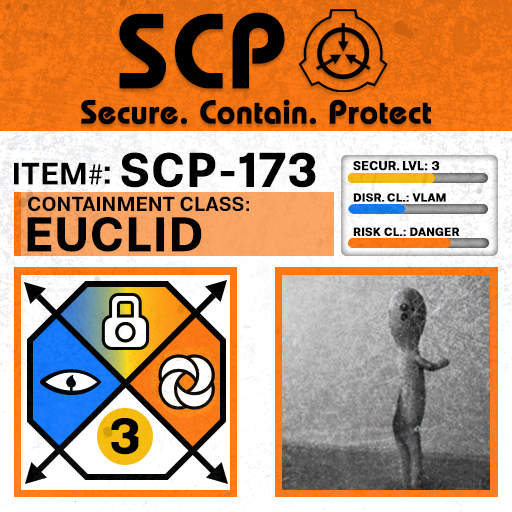
<style>
.page{position:relative;width:512px;height:512px}
.page>*{position:absolute;margin:0}
.t1{font:105.8px "BauhausLT-Demi";color:#000000;font-weight:bold}
.t2{font:33px "BauhausLT-Demi";color:#000000;font-weight:bold}
.t3{font:47.6px "Molde-Semibold";color:#000000;font-weight:bold}
.t4{font:12.5px "Molde-Semibold";color:#000000;font-weight:bold}
.t5{font:31.1px "Molde-Semibold";color:#000000}
.t6{font:31.1px "MyriadPro-Regular";color:#000000}
.t7{font:34.5px "Molde-Semibold";color:#000000}
.t8{font:20.3px "Molde-Semibold";color:#000000}
.t9{font:11.7px "Molde-Semibold";color:#000000;font-weight:bold}
.t10{font:47.8px "Molde-Semibold";color:#000000;font-weight:bold}
</style>
<div class="page">
<p class="t1" style="left:119px;top:12px;width:166px;height:77px">SCP</p>
<p class="t2" style="left:81px;top:99px;width:350px;height:26px">Secure. Contain. Protect</p>
<p class="t3" style="left:121px;top:152px;width:195px;height:36px">SCP-173</p>
<p class="t4" style="left:353px;top:161px;width:87px;height:10px">SECUR. LVL: 3</p>
<p class="t5" style="left:14px;top:162px;width:89px;height:23px">ITEM<span class="t6">#</span></p>
<p class="t7" style="left:104px;top:166px;width:6px;height:18px">:</p>
<p class="t8" style="left:28px;top:196px;width:221px;height:16px">CONTAINMENT CLASS:</p>
<p class="t9" style="left:353px;top:193px;width:93px;height:9px">DISR. CL.: VLAM</p>
<p class="t10" style="left:27px;top:217px;width:175px;height:35px">EUCLID</p>
<p class="t9" style="left:353px;top:227px;width:107px;height:9px">RISK CL.: DANGER</p>
</div>
